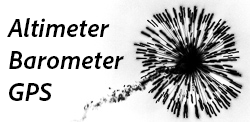
<style>
.page{position:relative;width:250px;height:122px;background:#ffffff}
.page>*{position:absolute;margin:0}
.t1{font:26.7px "AdobeClean-BoldIt";color:#000000}
</style>
<div class="page">
<p class="t1" style="left:7px;top:18px;width:117px;height:83px">Altimeter<br>Barometer<br>GPS</p>
</div>
